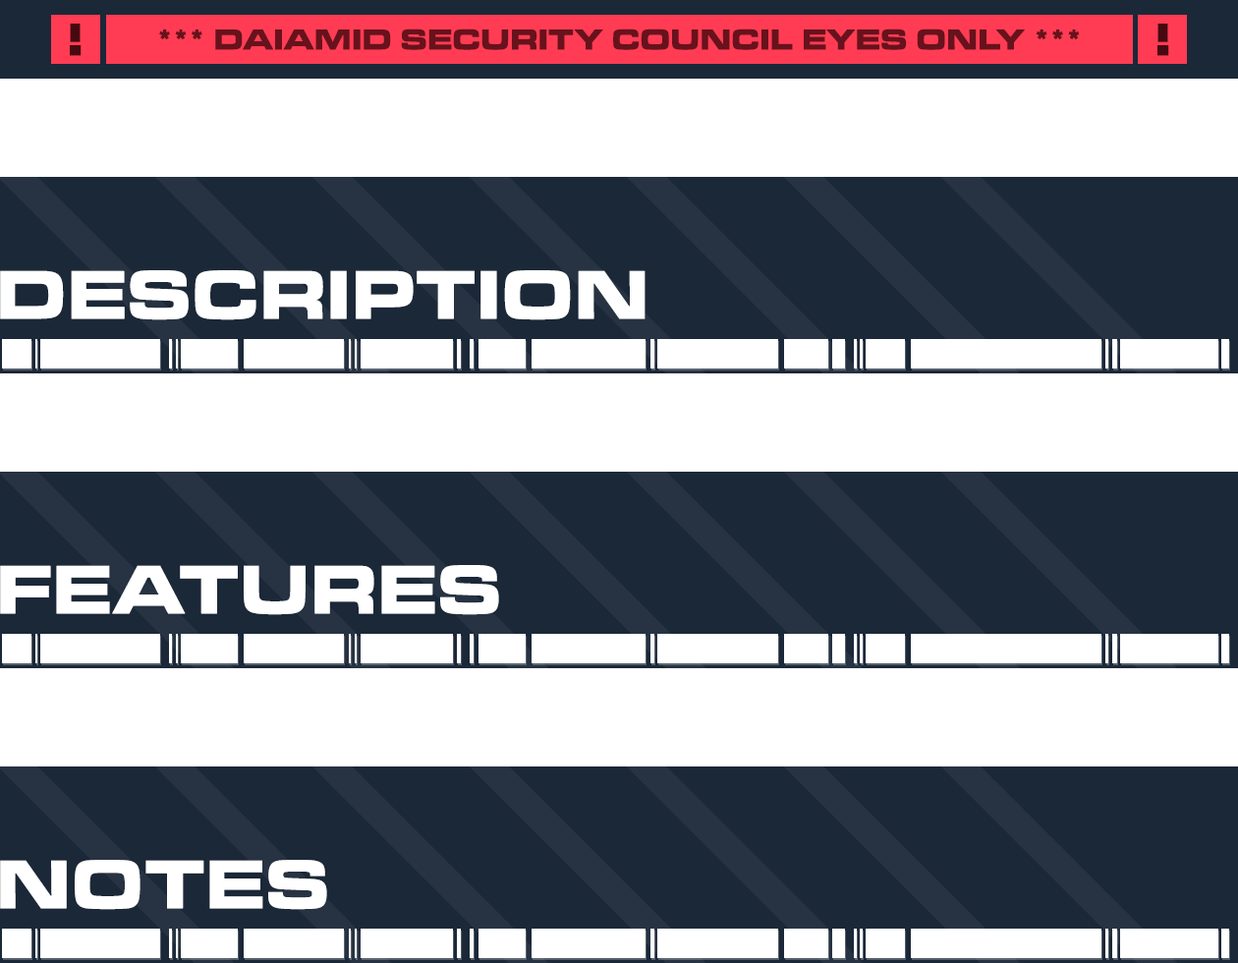
<style>
.page{position:relative;width:1238px;height:963px;background:#ffffff}
.page>*{position:absolute;margin:0}
.t1{font:47.2px "MicrogrammaD-BoldExte";letter-spacing:0.02em;color:#470911;text-transform:uppercase;font-weight:bold}
.t2{font:29.5px "MicrogrammaD-BoldExte";letter-spacing:0.02em;color:#67121c;text-transform:uppercase;font-weight:bold}
.t3{font:70.8px "MicrogrammaD-BoldExte";letter-spacing:0.02em;color:#ffffff;text-transform:uppercase;font-weight:bold}
</style>
<div class="page">
<p class="t1" style="left:70px;top:24px;width:12px;height:32px">!</p>
<p class="t2" style="left:159px;top:28px;width:921px;height:22px">*** daiamid security council eyes only ***</p>
<p class="t1" style="left:1158px;top:24px;width:11px;height:32px">!</p>
<p class="t3" style="left:0px;top:270px;width:646px;height:50px">Description</p>
<p class="t3" style="left:0px;top:565px;width:499px;height:50px">Features</p>
<p class="t3" style="left:0px;top:860px;width:327px;height:50px">Notes</p>
</div>
